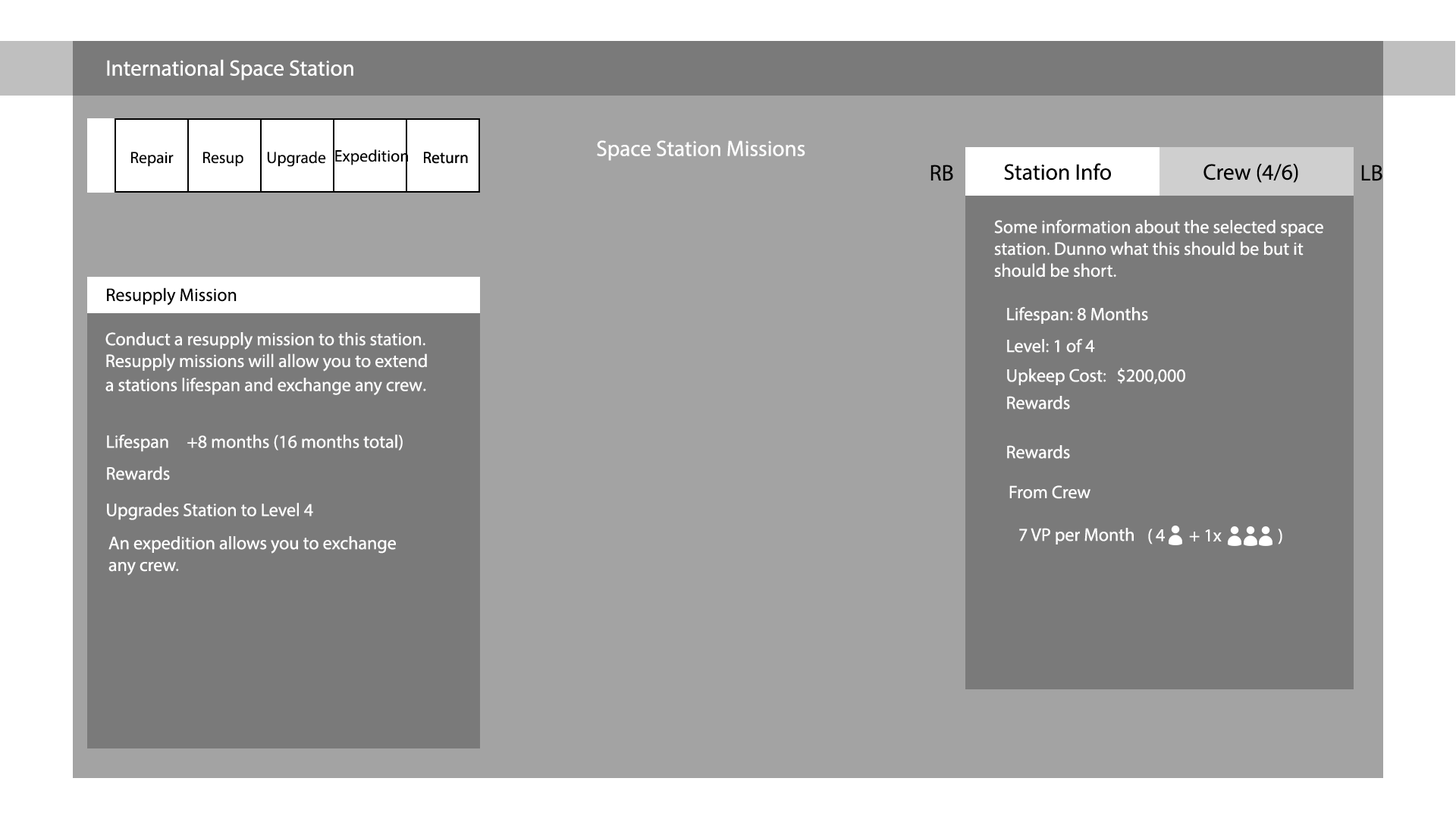
<style>
.page{position:relative;width:1456px;height:819px;background:#a3a3a3}
.page>*{position:absolute;margin:0}
.t1{font:22.1px "MyriadPro-Regular";color:#ffffff}
.t2{font:16.7px "MyriadPro-Regular";color:#000000}
.t3{font:16.4px "MyriadPro-Regular";color:#000000}
.t4{font:22.6px "MyriadPro-Regular";color:#000000}
.t5{font:22.5px "MyriadPro-Regular";color:#000000}
.t6{font:18.2px "MyriadPro-Regular";color:#ffffff}
.t7{font:18.2px "MyriadPro-Regular";color:#000000}
.t8{font:19.9px "MyriadPro-Regular";color:#ffffff}
</style>
<div class="page">
<p class="t1" style="left:107px;top:59px;width:246px;height:21px">International Space Station</p>
<p class="t2" style="left:335px;top:149px;width:73px;height:16px">Expedition</p>
<p class="t1" style="left:597px;top:140px;width:208px;height:21px">Space Station Missions</p>
<p class="t3" style="left:131px;top:152px;width:43px;height:15px">Repair</p>
<p class="t3" style="left:203px;top:152px;width:40px;height:15px">Resup</p>
<p class="t3" style="left:267px;top:151px;width:59px;height:16px">Upgrade</p>
<p class="t4" style="left:930px;top:165px;width:23px;height:16px">RB</p>
<p class="t5" style="left:1004px;top:163px;width:107px;height:17px">Station Info</p>
<p class="t5" style="left:1203px;top:164px;width:95px;height:19px">Crew (4/6)</p>
<p class="t4" style="left:1361px;top:165px;width:21px;height:16px">LB</p>
<p class="t6" style="left:994px;top:219px;width:329px;height:59px">Some information about the selected space<br>station. Dunno what this should be but it <br>should be short.</p>
<p class="t7" style="left:107px;top:287px;width:130px;height:19px">Resupply Mission</p>
<p class="t6" style="left:1007px;top:306px;width:141px;height:18px">Lifespan: 8 Months</p>
<p class="t6" style="left:105px;top:332px;width:322px;height:63px">Conduct a resupply mission to this station.<br>Resupply missions will allow you to extend<br>a stations lifespan and exchange any crew<span class="t8">.</span></p>
<p class="t6" style="left:1007px;top:338px;width:88px;height:15px">Level: 1 of 4</p>
<p class="t6" style="left:1007px;top:369px;width:99px;height:16px">Upkeep Cost:</p>
<p class="t6" style="left:1118px;top:368px;width:67px;height:16px">$200,000</p>
<p class="t6" style="left:1007px;top:396px;width:63px;height:13px">Rewards</p>
<p class="t6" style="left:107px;top:435px;width:61px;height:17px">Lifespan</p>
<p class="t6" style="left:187px;top:435px;width:216px;height:15px">+8 months (16 months total)</p>
<p class="t6" style="left:1007px;top:445px;width:63px;height:14px">Rewards</p>
<p class="t6" style="left:107px;top:466px;width:63px;height:14px">Rewards</p>
<p class="t6" style="left:1009px;top:485px;width:81px;height:14px">From Crew</p>
<p class="t6" style="left:107px;top:503px;width:206px;height:17px">Upgrades Station to Level 4</p>
<p class="t6" style="left:1019px;top:528px;width:115px;height:16px">7 VP per Month</p>
<p class="t6" style="left:1148px;top:529px;width:5px;height:15px">(</p>
<p class="t6" style="left:1156px;top:529px;width:9px;height:12px">4</p>
<p class="t6" style="left:1189px;top:529px;width:33px;height:12px">+ 1x</p>
<p class="t6" style="left:1278px;top:529px;width:4px;height:15px;rotate:180deg">(</p>
<p class="t6" style="left:108px;top:536px;width:288px;height:40px">An expedition allows you to exchange <br>any crew.</p>
</div>
